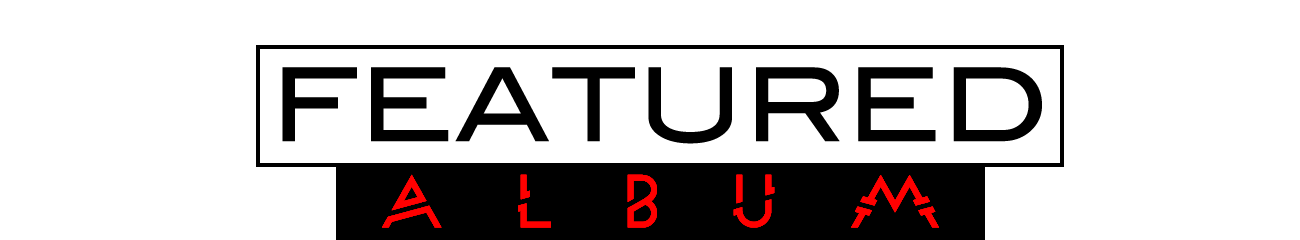
<style>
.page{position:relative;width:1300px;height:240px;background:#ffffff}
.page>*{position:absolute;margin:0}
.t1{font:101.6px "BlairMdITCTTMedium";color:#000000}
.t2{font:70px "Moondance";letter-spacing:1em;color:#ff0000}
</style>
<div class="page">
<p class="t1" style="left:282px;top:67px;width:760px;height:77px">FEATURED</p>
<p class="t2" style="left:382px;top:174px;width:557px;height:54px">ALBUM</p>
</div>
